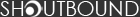
<style>
.page{position:relative;width:140px;height:17px;background:#333333}
.page>*{position:absolute;margin:0}
.t1{font:20.9px "CenturyGothic";color:#ffffff}
.t2{font:21.3px "CenturyGothic";color:#ffffff}
</style>
<div class="page">
<p class="t1" style="left:0px;top:1px;width:139px;height:15px"><span class="t2">S</span>H   UT<span class="t2">BOUND</span></p>
</div>
